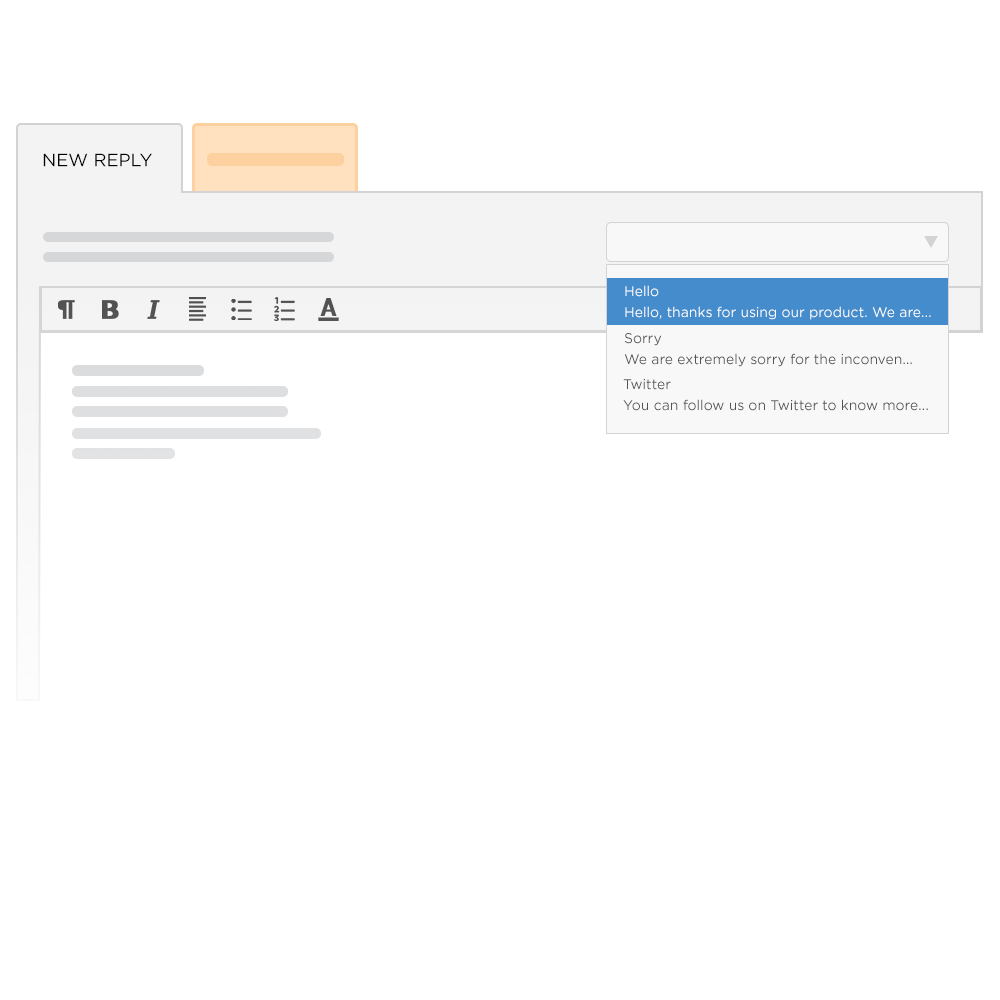
<style>
.page{position:relative;width:1000px;height:1000px;background:#ffffff}
.page>*{position:absolute;margin:0}
.t1{font:18px "Gotham-Book";color:#010101;text-transform:uppercase}
.t2{font:14px/21px "Gotham-Book";color:#ffffff}
.t3{font:14px/21px "Gotham-Book";color:#535353}
</style>
<div class="page">
<p class="t1" style="left:43px;top:153px;width:109px;height:14px">new reply</p>
<p class="t2" style="left:625px;top:285px;width:306px;height:35px">Hello<br>Hello, thanks for using our product. We are...</p>
<p class="t3" style="left:624px;top:333px;width:288px;height:34px">Sorry<br>We are extremely sorry for the inconven...</p>
<p class="t3" style="left:623px;top:379px;width:305px;height:32px">Twitter<br>You can follow us on Twitter to know more...</p>
</div>
